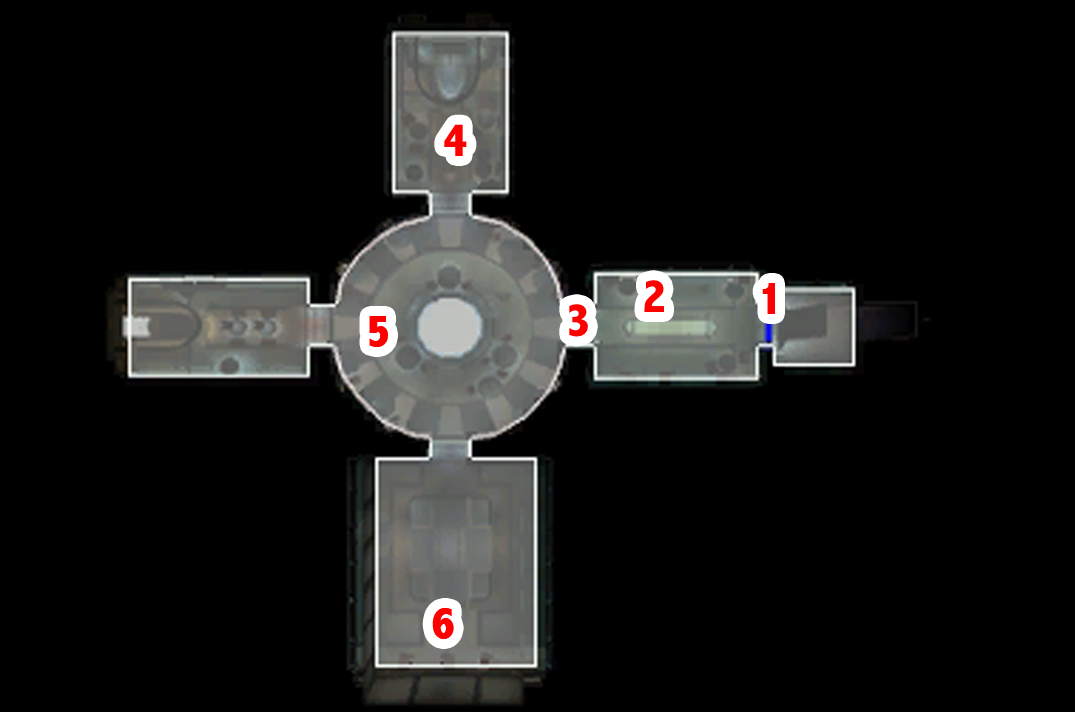
<style>
.page{position:relative;width:1075px;height:712px;background:#000000}
.page>*{position:absolute;margin:0}
.t1{font:48px "AbadiMT-CondensedExtraBold";color:#ff0000}
</style>
<div class="page">
<p class="t1" style="left:444px;top:124px;width:23px;height:32px">4</p>
<p class="t1" style="left:644px;top:280px;width:20px;height:32px">2</p>
<p class="t1" style="left:762px;top:283px;width:13px;height:31px">1</p>
<p class="t1" style="left:569px;top:304px;width:19px;height:33px">3</p>
<p class="t1" style="left:369px;top:316px;width:19px;height:31px">5</p>
<p class="t1" style="left:432px;top:608px;width:22px;height:31px">6</p>
</div>
